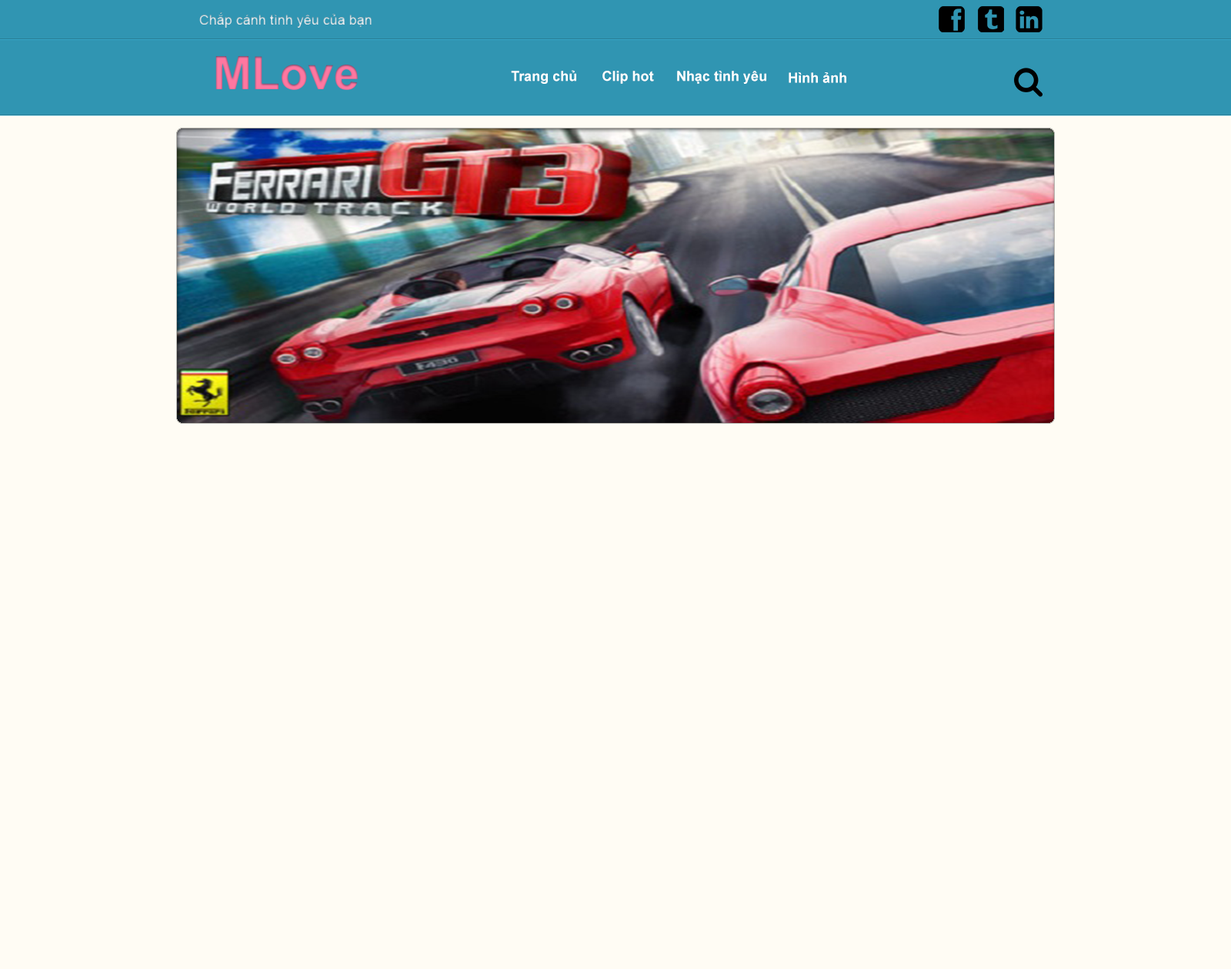
<style>
.page{position:relative;width:1231px;height:969px;background:#fffcf4}
.page>*{position:absolute;margin:0}
.t1{font:13.8px "ArialMT"}
.t2{font:46.1px "Arial-BoldMT";color:#ff77a0}
.t3{font:13.8px "Arial-BoldMT";color:#ffffff}
</style>
<div class="page">
<p class="t1" style="left:199px;top:12px;width:172px;height:16px">Chắp cánh tình yêu của bạn</p>
<p class="t2" style="left:215px;top:56px;width:143px;height:34px">MLove</p>
<p class="t3" style="left:511px;top:70px;width:65px;height:14px">Trang chủ</p>
<p class="t3" style="left:602px;top:71px;width:52px;height:13px">Clip hot</p>
<p class="t3" style="left:677px;top:71px;width:89px;height:13px">Nhạc tình yêu</p>
<p class="t3" style="left:788px;top:72px;width:58px;height:11px">Hình ảnh</p>
</div>
